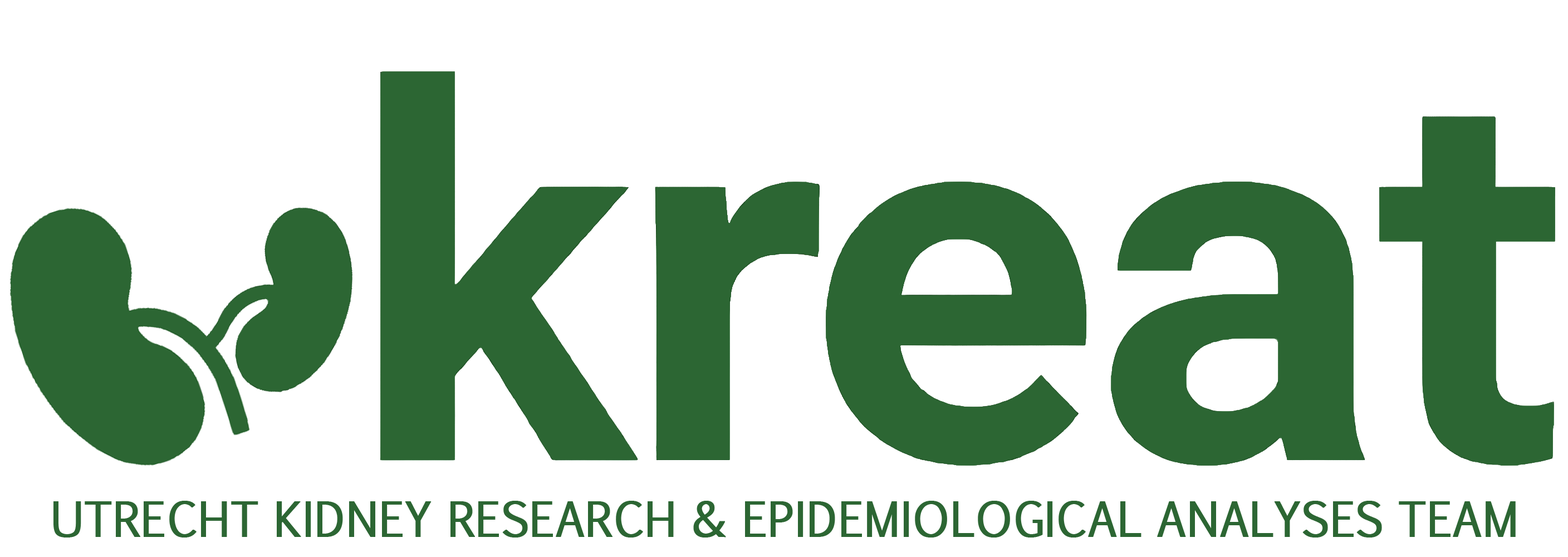
<style>
.page{position:relative;width:1568px;height:557px;background:#ffffff}
.page>*{position:absolute;margin:0}
.t1{font:45.7px "EuphemiaCAS";color:#2c6633;font-weight:bold}
</style>
<div class="page">
<p class="t1" style="left:53px;top:501px;width:1463px;height:36px">UTRECHT KIDNEY RESEARCH &amp; EPIDEMIOLOGICAL ANALYSES TEAM</p>
</div>
